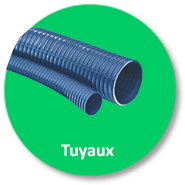
<style>
.page{position:relative;width:185px;height:185px;background:#00cc66}
.page>*{position:absolute;margin:0}
.t1{font:18px "Calibri-Bold";color:#ffffff}
</style>
<div class="page">
<p class="t1" style="left:61px;top:144px;width:53px;height:16px">Tuyaux</p>
</div>
